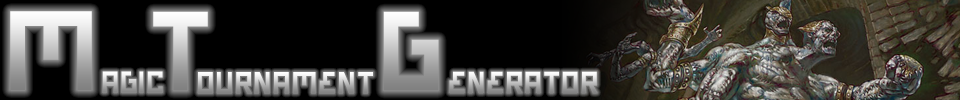
<style>
.page{position:relative;width:960px;height:100px;background:#000000}
.page>*{position:absolute;margin:0}
.t1{font:110px "BionicTypeBold"}
.t2{font:30px "BionicTypeBold";letter-spacing:0.1em}
</style>
<div class="page">
<p class="t1" style="left:10px;top:11px;width:82px;height:79px">M</p>
<p class="t1" style="left:153px;top:11px;width:55px;height:80px">T</p>
<p class="t1" style="left:383px;top:11px;width:56px;height:80px">G</p>
<p class="t2" style="left:102px;top:71px;width:61px;height:22px">agic</p>
<p class="t2" style="left:198px;top:72px;width:175px;height:22px">ournament</p>
<p class="t2" style="left:449px;top:71px;width:148px;height:22px">enerator</p>
</div>
